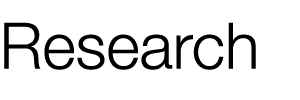
<style>
.page{position:relative;width:300px;height:100px;background:#ffffff}
.page>*{position:absolute;margin:0}
.t1{font:64px "HelveticaNeue-Light";color:#000000}
</style>
<div class="page">
<p class="t1" style="left:4px;top:22px;width:252px;height:48px">Research</p>
</div>
